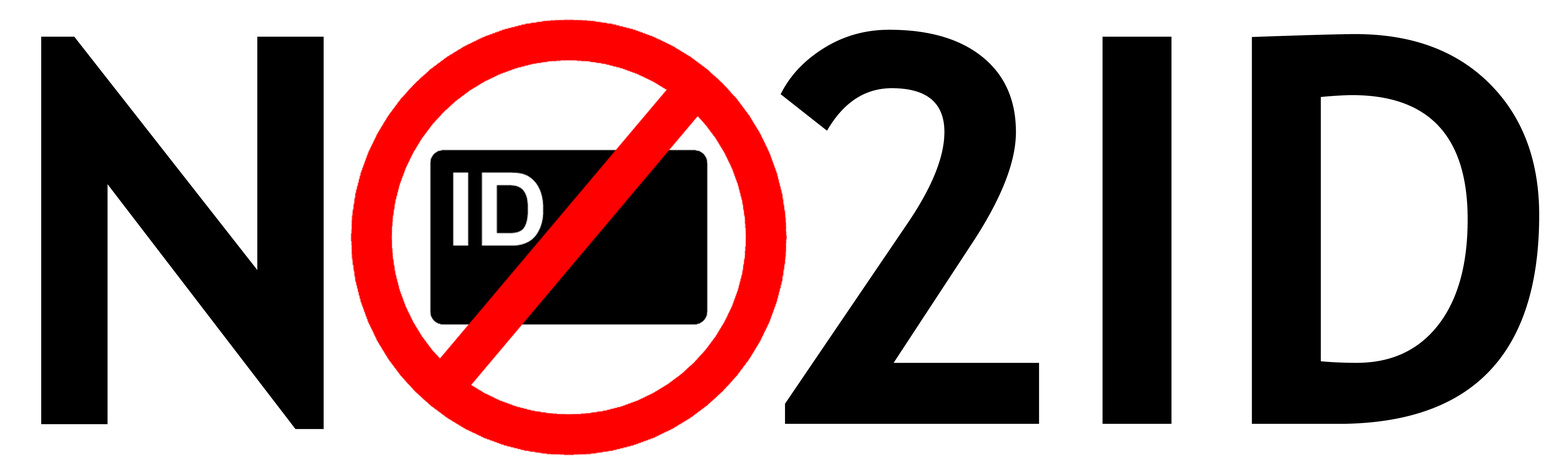
<style>
.page{position:relative;width:1568px;height:474px;background:#ffffff}
.page>*{position:absolute;margin:0}
.t1{font:541.3px "TrebuchetMS-Bold";color:#000000}
</style>
<div class="page">
<p class="t1" style="left:41px;top:29px;width:1498px;height:400px">N  2ID</p>
</div>
